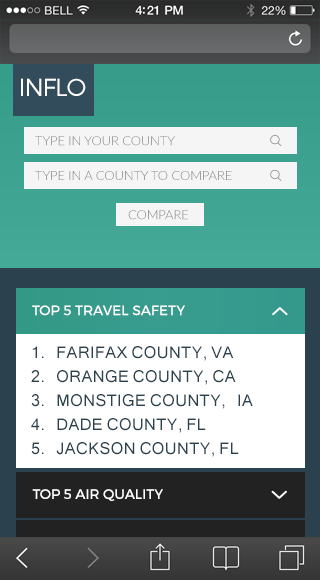
<style>
.page{position:relative;width:320px;height:580px}
.page>*{position:absolute;margin:0}
.t1{font:24.5px "Montserrat-Light";letter-spacing:-0.05em;color:#fefefe}
.t2{font:12.7px "Lato-Light";letter-spacing:-0.005em;color:#808080;text-transform:uppercase}
.t3{font:14px "Montserrat-Regular";letter-spacing:-0.005em;color:#ffffff;text-transform:uppercase}
.t4{font:18px/24px "Latha";letter-spacing:0.025em;color:#2b414d;text-transform:uppercase}
.t5{font:13.9px "Montserrat-Regular";letter-spacing:-0.005em;color:#ffffff;text-transform:uppercase}
</style>
<div class="page">
<p class="t1" style="left:21px;top:78px;width:65px;height:18px">INFLO</p>
<p class="t2" style="left:35px;top:136px;width:140px;height:10px">type in your county</p>
<p class="t2" style="left:35px;top:171px;width:197px;height:9px">type in a county to compare</p>
<p class="t2" style="left:128px;top:210px;width:61px;height:10px">compare</p>
<p class="t3" style="left:32px;top:305px;width:153px;height:11px">Top 5 TRAVEL SAFETY</p>
<p class="t4" style="left:31px;top:346px;width:222px;height:111px;text-align:justify">1. Farifax county, VA<br>2. ORANGE COUNTY, CA<br>3. MONSTIGE COUNTY, IA<br>4. dADE COUNTY, fl<br>5. JACKSON COUNTY, FL</p>
<p class="t5" style="left:32px;top:489px;width:131px;height:12px">TOP 5 AIR QUALITY</p>
</div>
